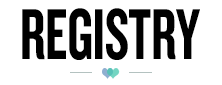
<style>
.page{position:relative;width:222px;height:85px;background:#ffffff}
.page>*{position:absolute;margin:0}
.t1{font:74.3px "Knockout-HTF49-Liteweight";color:#000000;scale:0.77 1}
</style>
<div class="page">
<p class="t1" style="left:22px;top:8px;width:178px;height:52px">REGISTRY</p>
</div>
